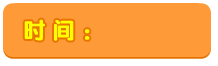
<style>
.page{position:relative;width:218px;height:66px;background:#fe9a38}
.page>*{position:absolute;margin:0}
.t1{font:22px "JCuYuan";letter-spacing:0.3em;color:#fffe00;font-weight:bold}
</style>
<div class="page">
<p class="t1" style="left:24px;top:19px;width:66px;height:22px">时间：</p>
</div>
